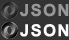
<style>
.page{position:relative;width:69px;height:40px;background:#333333}
.page>*{position:absolute;margin:0}
.t1{font:16.6px "Arial-BoldMT";letter-spacing:0.085em;color:#999898}
.t2{font:16.6px "Arial-BoldMT";letter-spacing:0.085em;color:#fefcfc}
</style>
<div class="page">
<p class="t1" style="left:20px;top:3px;width:49px;height:14px">JSON</p>
<p class="t2" style="left:20px;top:24px;width:49px;height:13px">JSON</p>
</div>
